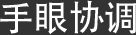
<style>
.page{position:relative;width:136px;height:35px;background:#333333}
.page>*{position:absolute;margin:0}
.t1{font:35.4px "AdobeHeitiStd-Regular";color:#ffffff}
</style>
<div class="page">
<p class="t1" style="left:0px;top:0px;width:136px;height:35px">手眼协调</p>
</div>
